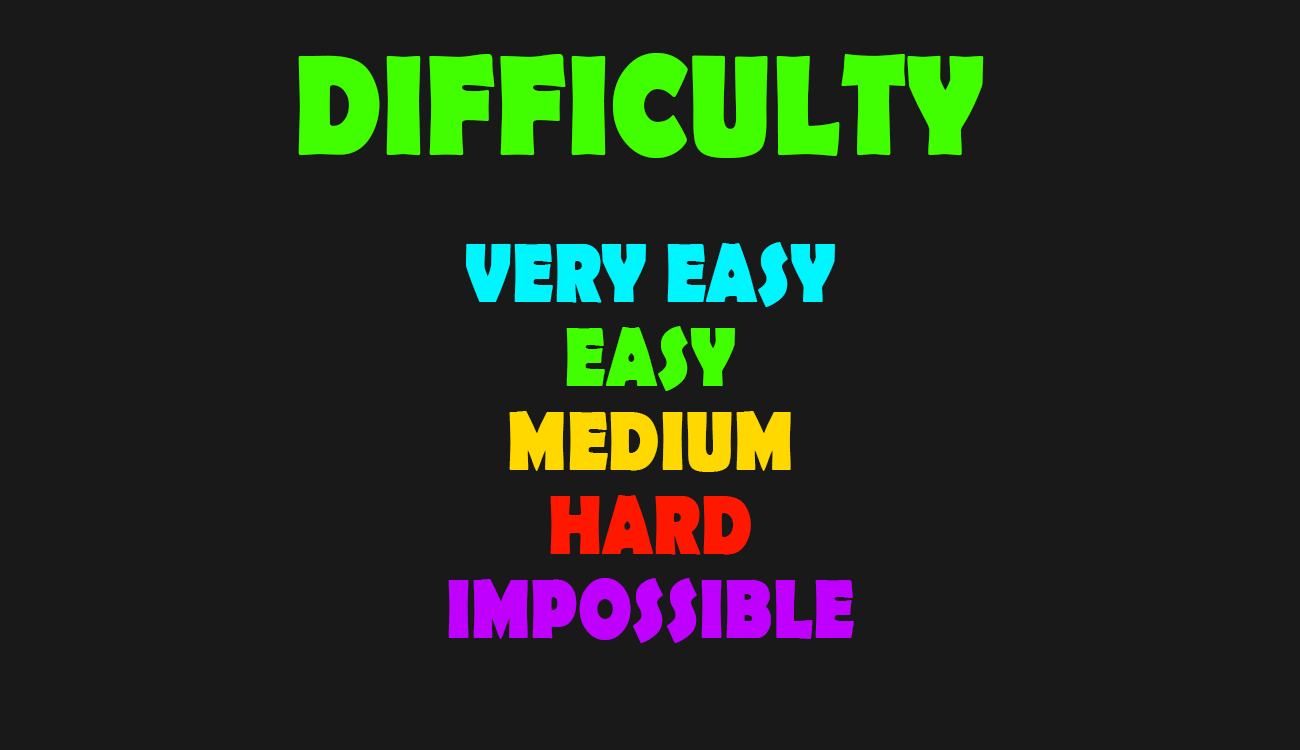
<style>
.page{position:relative;width:1300px;height:750px;background:#191919}
.page>*{position:absolute;margin:0}
.t1{font:144px "BerlinSansFB-Bold";color:#42ff00;scale:0.83 1}
.t2{font:84px "BerlinSansFB-Bold";color:#c000ff;scale:0.83 1}
.t3{font:84px "BerlinSansFB-Bold";color:#00f6ff;scale:0.83 1}
.t4{font:84px "BerlinSansFB-Bold";color:#42ff00;scale:0.83 1}
.t5{font:84px "BerlinSansFB-Bold";color:#ffd800;scale:0.83 1}
.t6{font:84px "BerlinSansFB-Bold";color:#ff1800;scale:0.83 1}
</style>
<div class="page">
<p class="t1" style="left:298px;top:53px;width:686px;height:105px">DIFFICULTY</p>
<p class="t2" style="left:448px;top:242px;width:406px;height:401px;text-align:center"><span class="t3">VERY EASY<br></span><span class="t4">EASY<br></span><span class="t5">MEDIUM<br></span><span class="t6">HARD<br></span>IMPOSSIBLE</p>
</div>
